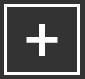
<style>
.page{position:relative;width:85px;height:79px;background:#333333}
.page>*{position:absolute;margin:0}
.t1{font:60px "MyriadPro-Bold";color:#ffffff}
</style>
<div class="page">
<p class="t1" style="left:26px;top:24px;width:32px;height:32px">+</p>
</div>
